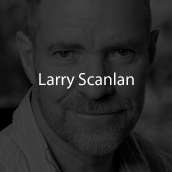
<style>
.page{position:relative;width:172px;height:172px}
.page>*{position:absolute;margin:0}
.t1{font:17.5px "MyriadPro-Regular";color:#ffffff}
</style>
<div class="page">
<p class="t1" style="left:39px;top:72px;width:95px;height:17px">Larry Scanlan</p>
</div>
